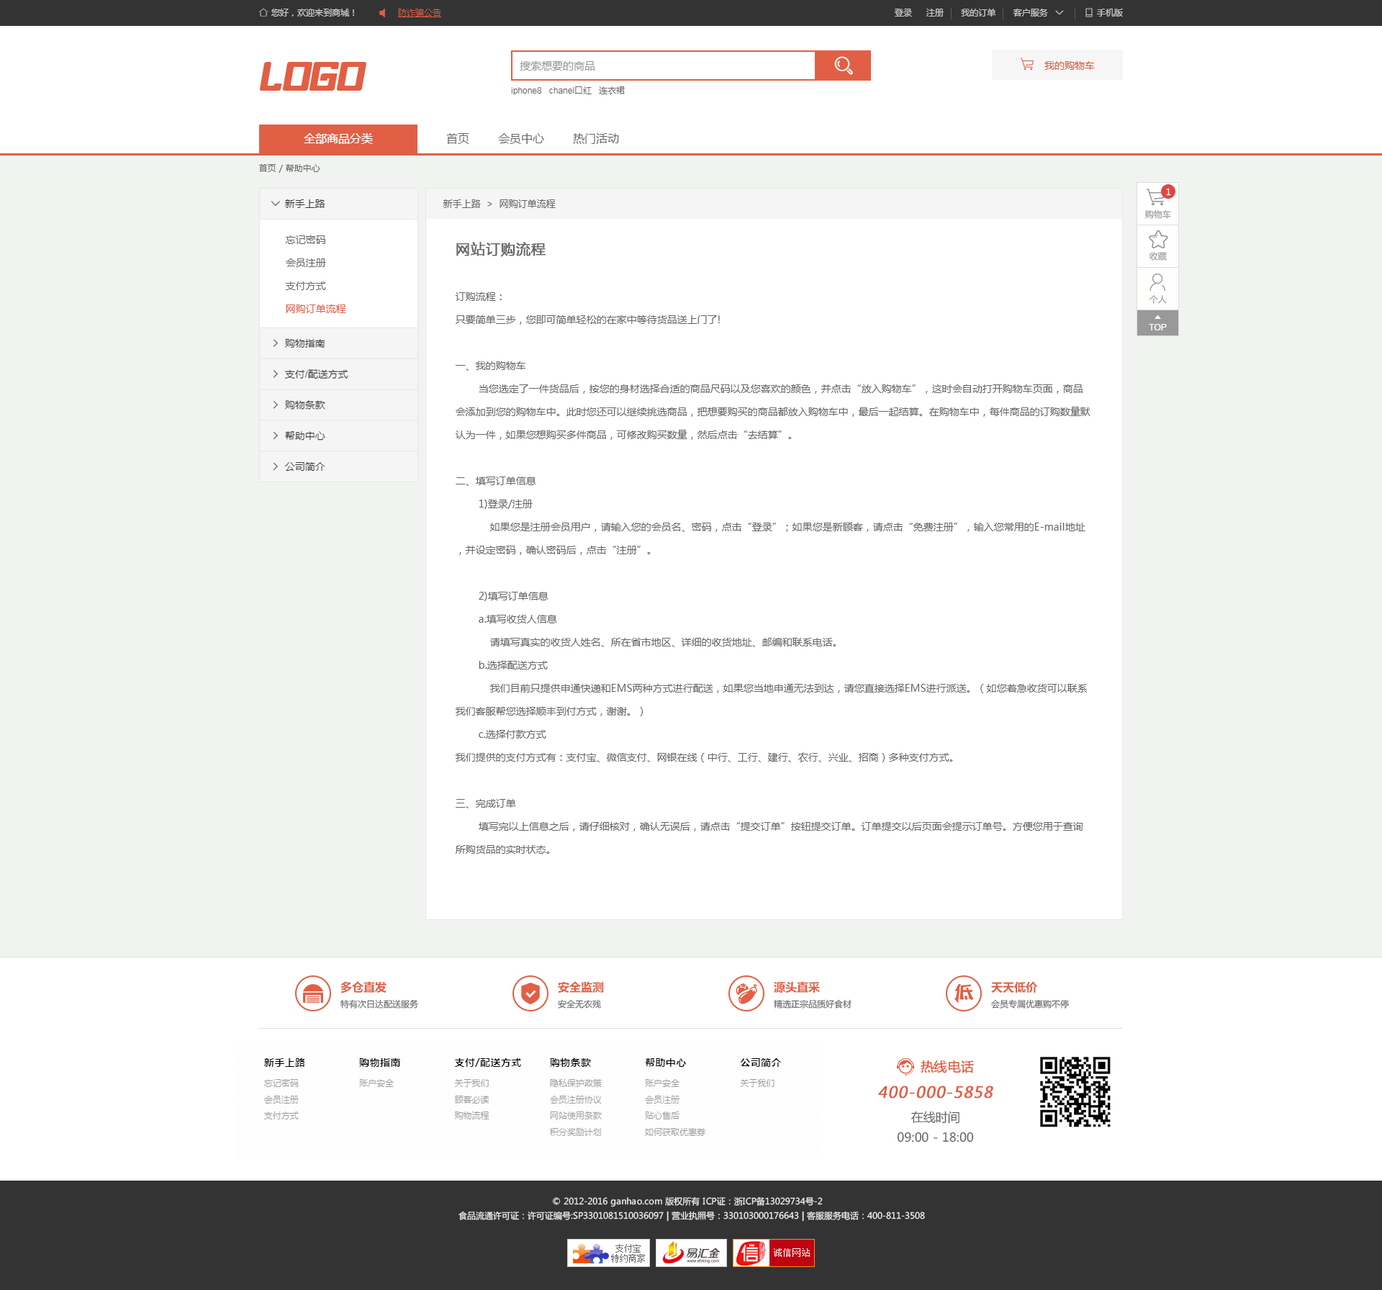
<style>
.page{position:relative;width:1382px;height:1290px;background:#ffffff}
.page>*{position:absolute;margin:0}
.t1{font:8.6px "MicrosoftYaHei";color:#666666}
.t2{font:8.6px "MicrosoftYaHei";color:#ffffff}
.t3{font:9.4px "MicrosoftYaHei";color:#666666}
.t4{font:8.6px "MicrosoftYaHei";color:#999999}
.t5{font:10.1px/23px "MicrosoftYaHei";color:#666666}
.t6{font:10.1px/23px "MicrosoftYaHei";color:#e15f45}
.t7{font:14.4px/23px "MicrosoftYaHei";color:#666666;font-weight:bold}
.t8{font:11.5px "MicrosoftYaHei-Bold";color:#e15f45}
.t9{font:13px "MicrosoftYaHei";color:#e15f45;font-weight:bold}
.t10{font:15.5px "MicrosoftYaHei";color:#e15f45;font-weight:bold;font-style:italic}
.t11{font:12.2px/20.1px "MicrosoftYaHei";color:#666666}
.t12{font:8.6px/14.4px "MicrosoftYaHei";color:#eeeeee}
</style>
<div class="page">
<p class="t1" style="left:259px;top:164px;width:61px;height:9px">首页 / 帮助中心</p>
<p class="t2" style="left:1166px;top:188px;width:5px;height:8px">1</p>
<p class="t3" style="left:443px;top:199px;width:113px;height:9px">新手上路  &gt;  网购订单流程</p>
<p class="t4" style="left:1146px;top:210px;width:25px;height:9px">购物车</p>
<p class="t5" style="left:285px;top:235px;width:61px;height:78px">忘记密码<br>会员注册<br>支付方式<br><span class="t6">网购订单流程</span></p>
<p class="t5" style="left:455px;top:242px;width:636px;height:612px"><span class="t7">网站订购流程<br><br></span>订购流程：<br>只要简单三步，您即可简单轻松的在家中等待货品送上门了!<br><br>一、我的购物车<br>        当您选定了一件货品后，按您的身材选择合适的商品尺码以及您喜欢的颜色，并点击“放入购物车”，这时会自动打开购物车页面，商品会添加到您的购物车中。此时您还可以继续挑选商品，把想要购买的商品都放入购物车中，最后一起结算。在购物车中，每件商品的订购数量默认为一件，如果您想购买多件商品，可修改购买数量，然后点击“去结算”。<br><br>二、填写订单信息<br>        1)登录/注册<br>            如果您是注册会员用户，请输入您的会员名、密码，点击“登录”；如果您是新顾客，请点击“免费注册”，输入您常用的E-mail地址，并设定密码，确认密码后，点击“注册”。<br><br>        2)填写订单信息<br>        a.填写收货人信息<br>            请填写真实的收货人姓名、所在省市地区、详细的收货地址、邮编和联系电话。<br>        b.选择配送方式<br>            我们目前只提供申通快递和EMS两种方式进行配送，如果您当地申通无法到达，请您直接选择EMS进行派送。（如您着急收货可以联系我们客服帮您选择顺丰到付方式，谢谢。）<br>        c.选择付款方式<br>我们提供的支付方式有：支付宝、微信支付、网银在线（中行、工行、建行、农行、兴业、招商）多种支付方式。<br><br>三、完成订单<br>        填写完以上信息之后，请仔细核对，确认无误后，请点击“提交订单”按钮提交订单。订单提交以后页面会提示订单号。方便您用于查询所购货品的实时状态。</p>
<p class="t4" style="left:1150px;top:251px;width:17px;height:10px">收藏</p>
<p class="t4" style="left:1149px;top:295px;width:18px;height:9px">个人</p>
<p class="t8" style="left:341px;top:981px;width:46px;height:13px">多仓直发</p>
<p class="t8" style="left:558px;top:981px;width:46px;height:13px">安全监测</p>
<p class="t8" style="left:774px;top:981px;width:46px;height:13px">源头直采</p>
<p class="t8" style="left:991px;top:981px;width:47px;height:13px">天天低价</p>
<p class="t1" style="left:341px;top:999px;width:77px;height:10px">特有次日达配送服务</p>
<p class="t1" style="left:558px;top:999px;width:43px;height:10px">安全无农残</p>
<p class="t1" style="left:774px;top:999px;width:78px;height:10px">精选正宗品质好食材</p>
<p class="t1" style="left:991px;top:999px;width:78px;height:10px">会员专属优惠购不停</p>
<p class="t9" style="left:921px;top:1061px;width:53px;height:13px">热线电话</p>
<p class="t10" style="left:878px;top:1086px;width:116px;height:13px">400-000-5858</p>
<p class="t11" style="left:897px;top:1111px;width:77px;height:32px;text-align:center">在线时间<br>09:00 - 18:00</p>
<p class="t12" style="left:459px;top:1197px;width:466px;height:25px;text-align:center">© 2012-2016 ganhao.com 版权所有 ICP证：浙ICP备13029734号-2   <br>食品流通许可证：许可证编号:SP3301081510036097 | 营业执照号：330103000176643 | 客服服务电话：400-811-3508</p>
</div>
